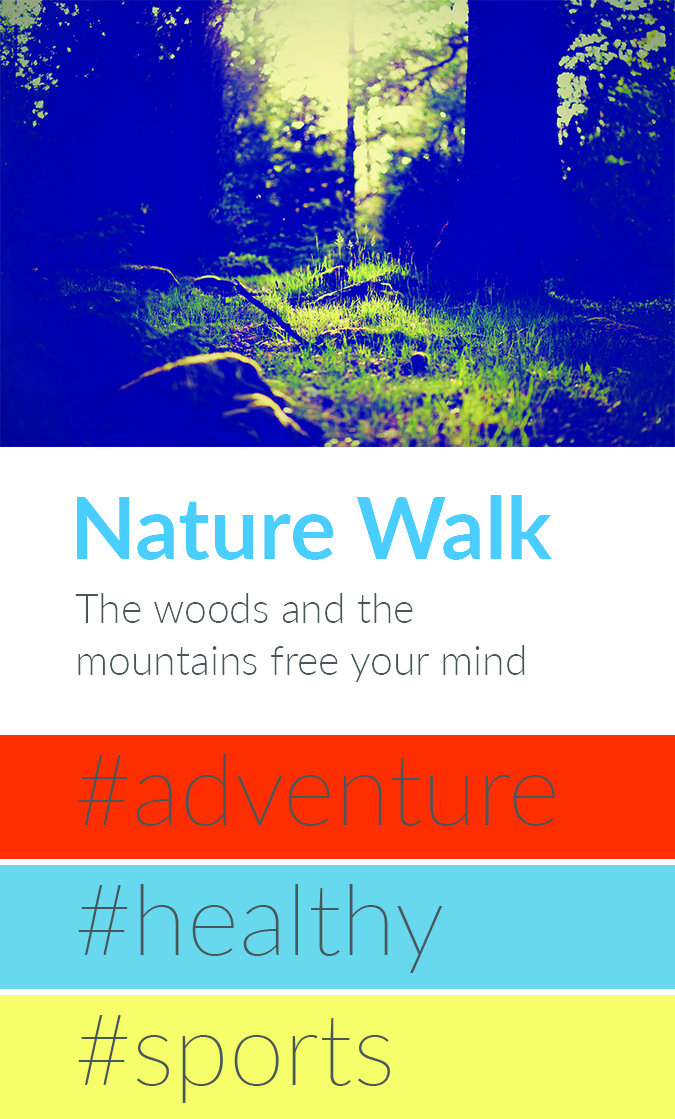
<style>
.page{position:relative;width:675px;height:1119px;background:#ffffff}
.page>*{position:absolute;margin:0}
.t1{font:86px "Lato-Bold";color:#4acdff}
.t2{font:41px/52px "Lato-Light";color:#48585a}
</style>
<div class="page">
<p class="t1" style="left:76px;top:495px;width:476px;height:65px">Nature Walk</p>
<p class="t2" style="left:75px;top:593px;width:450px;height:89px;text-align:right">The woods and the mountains free your mind</p>
</div>
